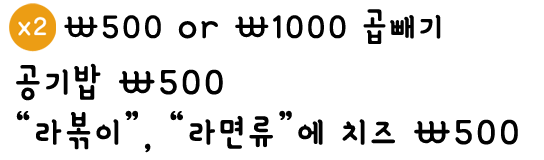
<style>
.page{position:relative;width:544px;height:160px;background:#ffffff}
.page>*{position:absolute;margin:0}
.t1{font:40px "YanoljaYacheR";letter-spacing:0.1em;color:#010101}
.t2{font:43px/50px "YanoljaYacheR";letter-spacing:0.1em;color:#010101}
</style>
<div class="page">
<p class="t1" style="left:64px;top:9px;width:377px;height:35px">\500 or \1000 곱빼기</p>
<p class="t2" style="left:16px;top:63px;width:502px;height:90px">공기밥 \500<br>“라볶이”, “라면류”에 치즈 \500</p>
</div>
